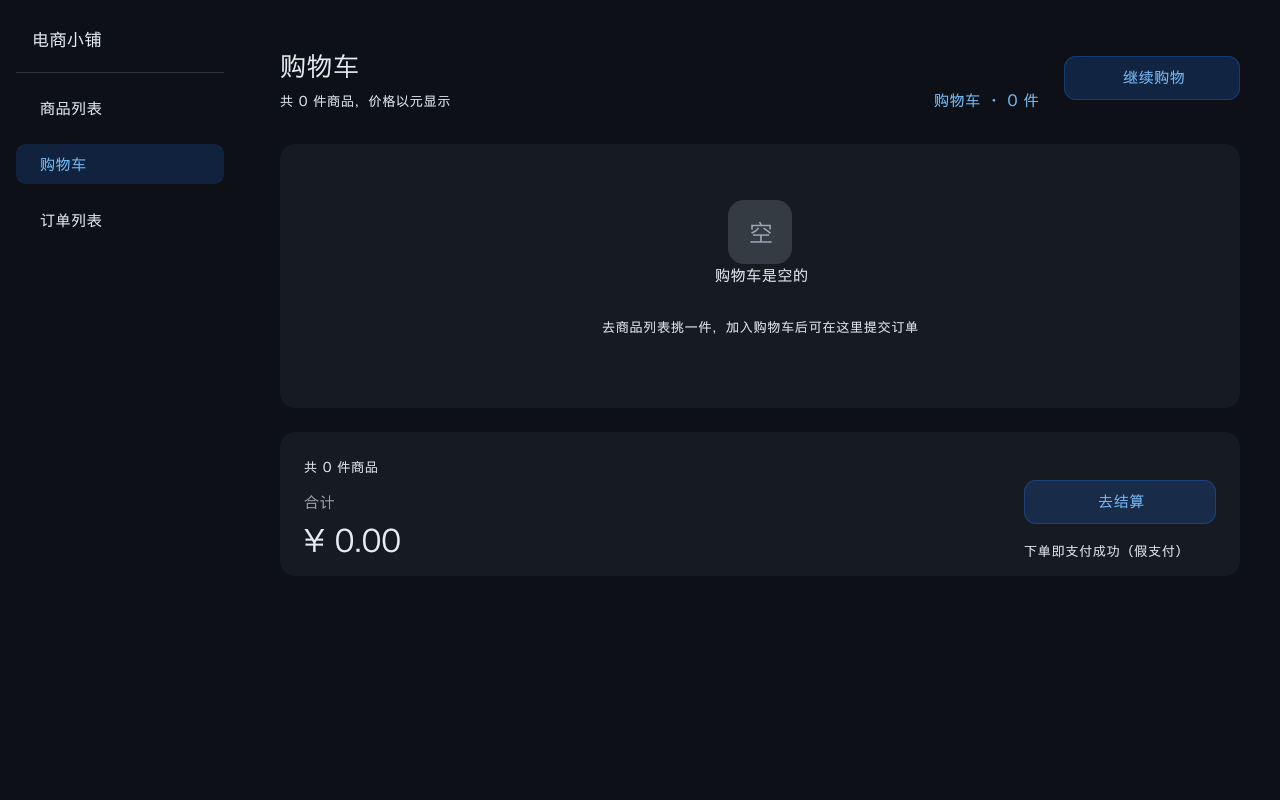
<style>
.page{position:relative;width:1280px;height:800px;background:#0d1117}
.page>*{position:absolute;margin:0}
.t1{font:17px "HiraginoSansGB-Regular";letter-spacing:0.03em;color:#e6edf3}
.t2{font:26px "HiraginoSansGB-Regular";letter-spacing:0.02em;color:#e6edf3}
.t3{font:15px "HiraginoSansGB-Regular";letter-spacing:0.04em;color:#79c0ff}
.t4{font:15px "HiraginoSansGB-Regular";letter-spacing:0.04em;color:#e6edf3}
.t5{font:13px "HiraginoSansGB-Regular";letter-spacing:0.06em;color:#e6edf3}
.t6{font:24px "HiraginoSansGB-Regular";letter-spacing:0.022em;color:#9ba7b4}
.t7{font:15px "HiraginoSansGB-Regular";letter-spacing:0.04em;color:#9ba7b4}
.t8{font:30px "HiraginoSansGB-Regular";color:#e6edf3}
</style>
<div class="page">
<p class="t1" style="left:33px;top:31px;width:69px;height:18px">电商小铺</p>
<p class="t2" style="left:279px;top:54px;width:80px;height:26px">购物车</p>
<p class="t3" style="left:1122px;top:70px;width:63px;height:16px">继续购物</p>
<p class="t4" style="left:39px;top:101px;width:64px;height:16px">商品列表</p>
<p class="t5" style="left:279px;top:95px;width:172px;height:14px">共 0 件商品，价格以元显示</p>
<p class="t3" style="left:933px;top:93px;width:107px;height:16px">购物车 · 0 件</p>
<p class="t3" style="left:39px;top:157px;width:48px;height:16px">购物车</p>
<p class="t4" style="left:39px;top:213px;width:64px;height:16px">订单列表</p>
<p class="t6" style="left:749px;top:221px;width:24px;height:23px">空</p>
<p class="t4" style="left:714px;top:268px;width:94px;height:16px">购物车是空的</p>
<p class="t5" style="left:601px;top:321px;width:318px;height:14px">去商品列表挑一件，加入购物车后可在这里提交订单</p>
<p class="t5" style="left:303px;top:461px;width:75px;height:13px">共 0 件商品</p>
<p class="t7" style="left:303px;top:495px;width:32px;height:16px">合计</p>
<p class="t3" style="left:1097px;top:494px;width:48px;height:16px">去结算</p>
<p class="t8" style="left:303px;top:528px;width:98px;height:26px">¥ 0.00</p>
<p class="t5" style="left:1023px;top:544px;width:158px;height:15px">下单即支付成功（假支付）</p>
</div>
